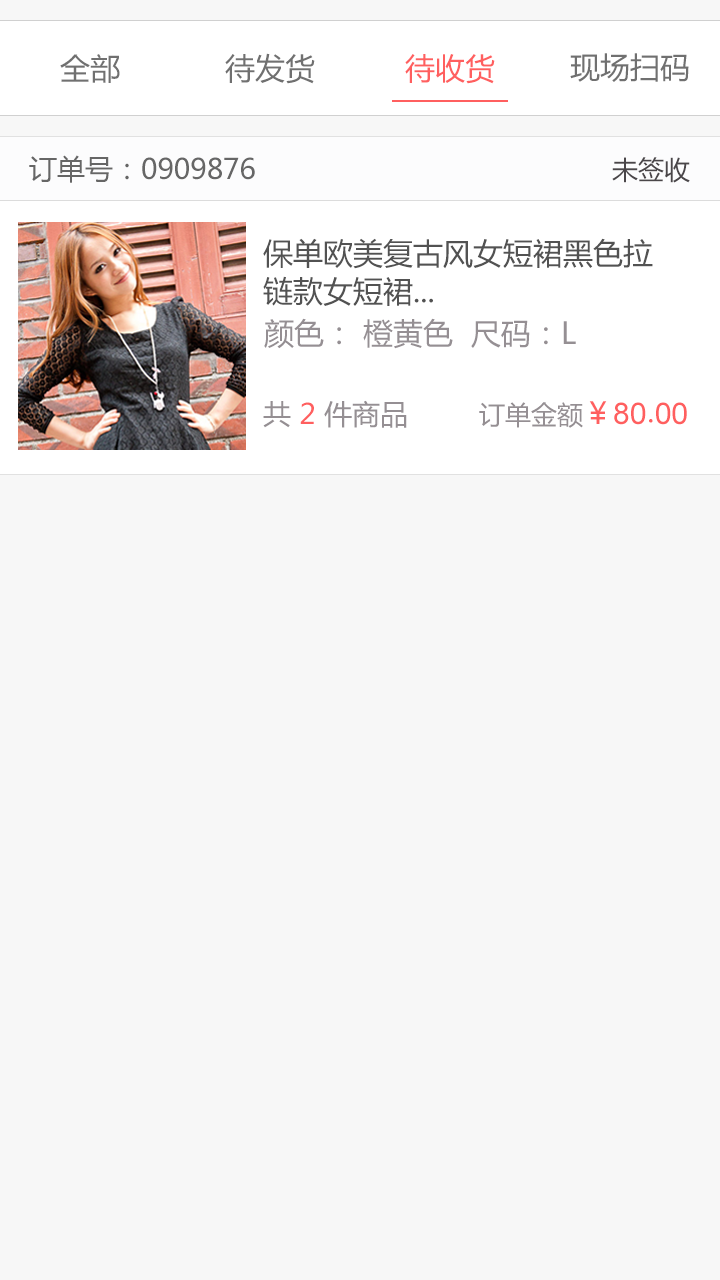
<style>
.page{position:relative;width:720px;height:1280px;background:#f7f7f7}
.page>*{position:absolute;margin:0}
.t1{font:30px "MicrosoftYaHei";color:#707070}
.t2{font:30px "MicrosoftYaHei";color:#ff5f5f}
.t3{font:28px "MicrosoftYaHei";color:#666666}
.t4{font:26px "MicrosoftYaHei";color:#4a4649}
.t5{font:30px/38px "MicrosoftYaHei";color:#525252}
.t6{font:30px "MicrosoftYaHei";color:#958f93}
.t7{font:28px "MicrosoftYaHei";color:#958f93}
.t8{font:28px "MicrosoftYaHei";color:#ff5f5f}
.t9{font:26px "MicrosoftYaHei";color:#958f93}
.t10{font:30px "ArialMT";color:#ff5f5f}
.t11{font:30px "STHeitiSC-Light";color:#ff5f5f}
</style>
<div class="page">
<p class="t1" style="left:60px;top:54px;width:60px;height:29px">全部</p>
<p class="t1" style="left:225px;top:53px;width:90px;height:31px">待发货</p>
<p class="t2" style="left:405px;top:54px;width:90px;height:30px">待收货</p>
<p class="t1" style="left:570px;top:53px;width:119px;height:29px">现场扫码</p>
<p class="t3" style="left:29px;top:155px;width:226px;height:28px">订单号：0909876</p>
<p class="t4" style="left:612px;top:157px;width:78px;height:26px">未签收</p>
<p class="t5" style="left:263px;top:238px;width:390px;height:68px">保单欧美复古风女短裙黑色拉<br>链款女短裙...</p>
<p class="t6" style="left:264px;top:318px;width:312px;height:31px">颜色： 橙黄色  尺码：L</p>
<p class="t7" style="left:263px;top:400px;width:144px;height:28px">共 <span class="t8">2 </span>件商品</p>
<p class="t9" style="left:479px;top:401px;width:208px;height:27px">订单金额<span class="t2">￥</span><span class="t10">80</span><span class="t11">.</span><span class="t10">00</span></p>
</div>
